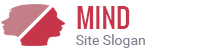
<style>
.page{position:relative;width:220px;height:50px;background:#ffffff}
.page>*{position:absolute;margin:0}
.t1{font:26px "Oswald-Regular";color:#c7354a}
.t2{font:14px "Roboto-Regular";color:#828292}
</style>
<div class="page">
<p class="t1" style="left:77px;top:6px;width:53px;height:23px">MIND</p>
<p class="t2" style="left:76px;top:34px;width:69px;height:14px">Site Slogan</p>
</div>
